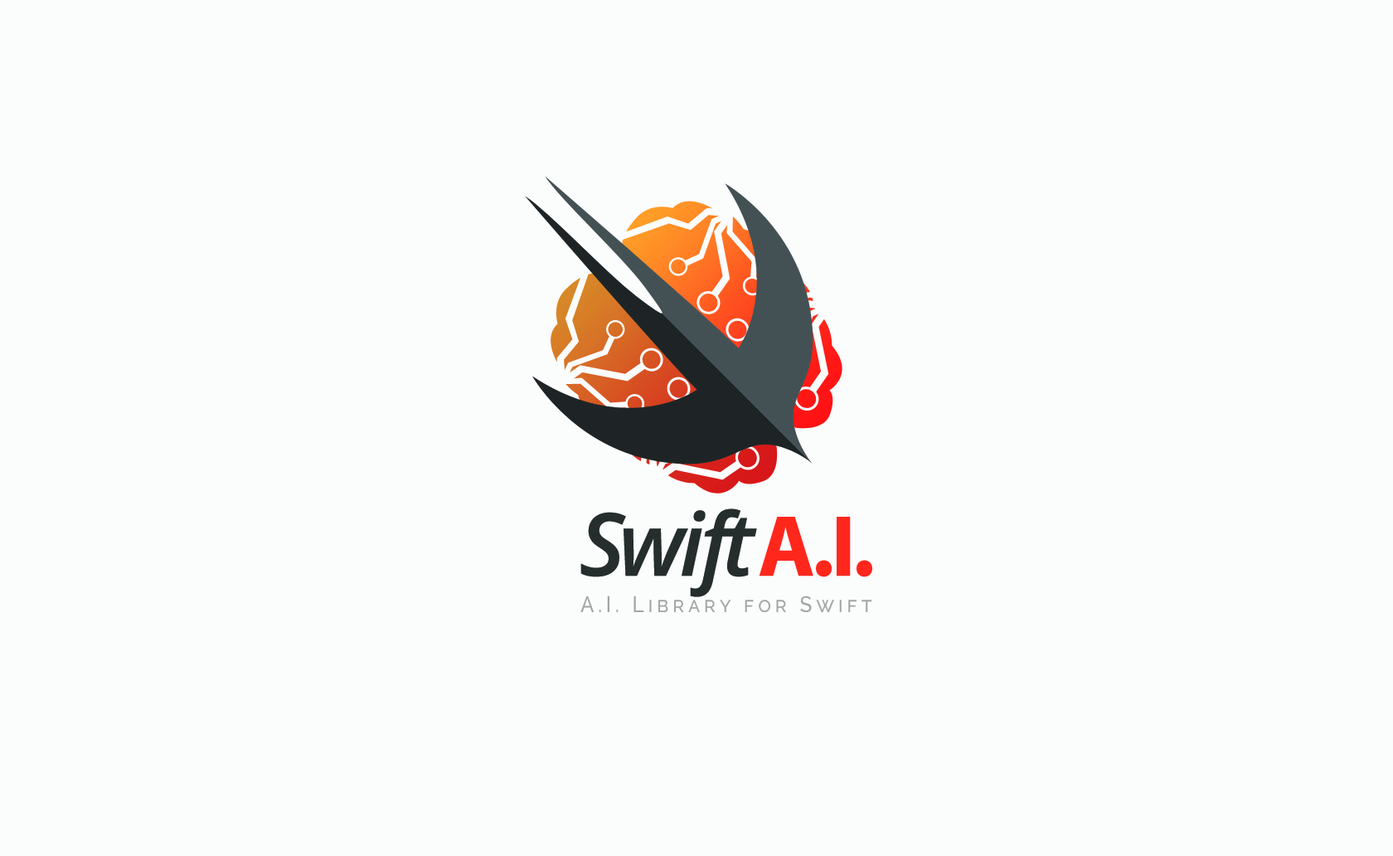
<style>
.page{position:relative;width:1393px;height:856px;background:#fbfcfc}
.page>*{position:absolute;margin:0}
.t1{font:87.3px "MyriadPro-Bold";letter-spacing:-0.04em;color:#ff271c}
.t2{font:87.3px "OpenSans-SemiboldItalic";letter-spacing:-0.07em;color:#252d2d}
.t3{font:87.3px "OpenSans-SemiboldItalic";letter-spacing:-0.05em;color:#252d2d}
.t4{font:87.3px "OpenSans-SemiboldItalic";letter-spacing:-0.04em;color:#252d2d}
.t5{font:87.3px "OpenSans-SemiboldItalic";letter-spacing:-0.09em;color:#252d2d}
.t6{font:87.3px "OpenSans-SemiboldItalic";letter-spacing:-0.03em;color:#252d2d}
.t7{font:22.1px "Raleway-Medium";letter-spacing:0.2em;color:#a2a6a6;font-variant:small-caps;scale:0.91 1}
</style>
<div class="page">
<p class="t1" style="left:581px;top:508px;width:291px;height:89px"><span class="t2">S</span><span class="t3">w</span><span class="t4">i</span><span class="t5">f</span><span class="t6">t </span>A.I.</p>
<p class="t7" style="left:581px;top:595px;width:291px;height:17px">A.I. Library for Swift</p>
</div>
